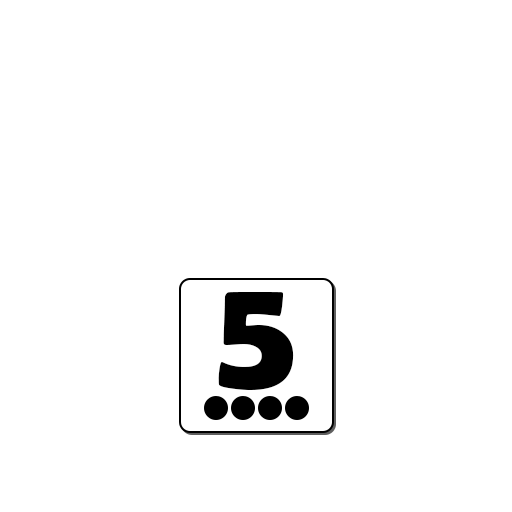
<style>
.page{position:relative;width:512px;height:512px;background:#ffffff}
.page>*{position:absolute;margin:0}
.t1{font:160px "BerlinSansFBDemi-Bold";color:#000000}
</style>
<div class="page">
<p class="t1" style="left:218px;top:292px;width:76px;height:98px">5</p>
</div>
